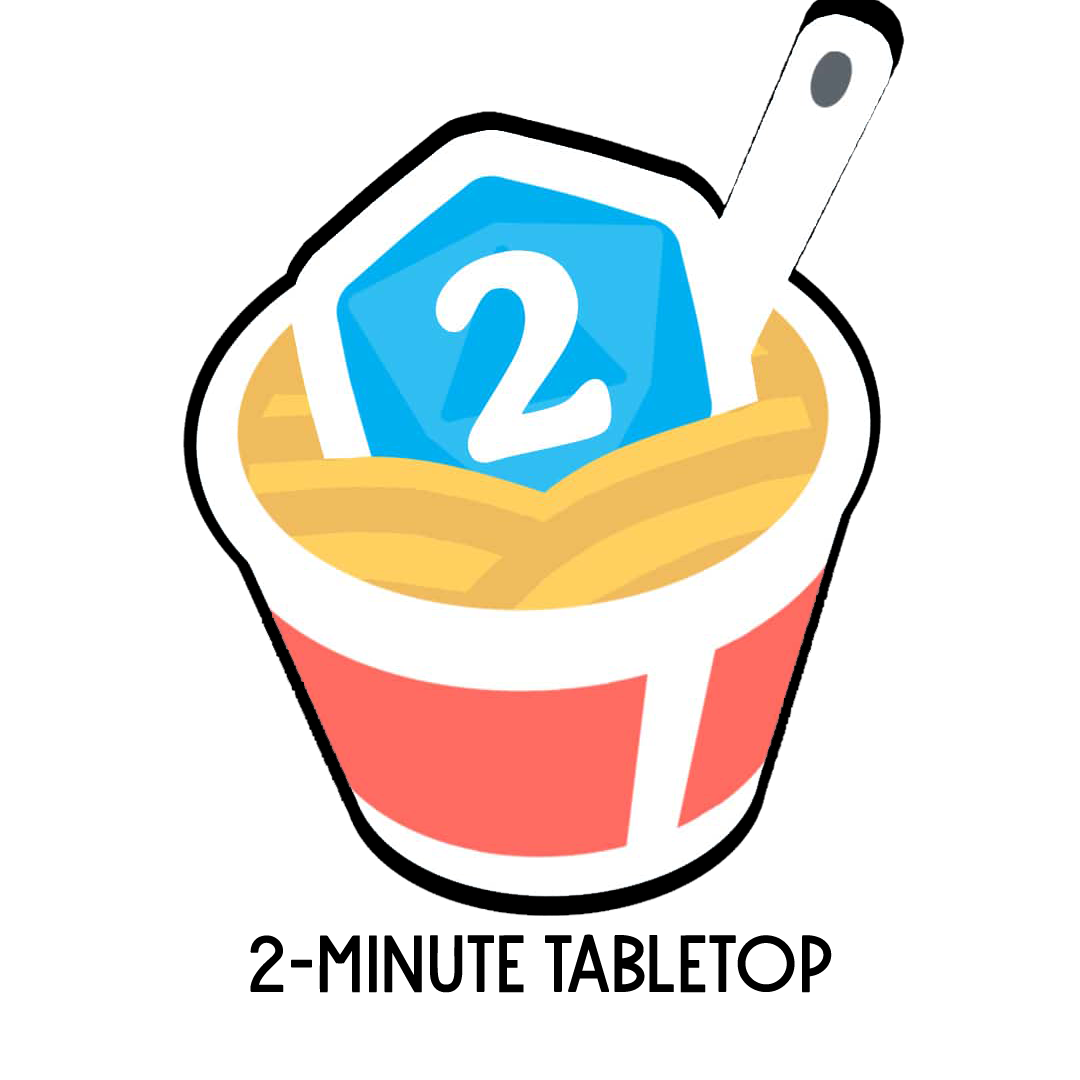
<style>
.page{position:relative;width:1080px;height:1080px;background:#ffffff}
.page>*{position:absolute;margin:0}
.t1{font:80px "Lavigne";color:#000000}
</style>
<div class="page">
<p class="t1" style="left:250px;top:934px;width:582px;height:59px">2-Minute Tabletop</p>
</div>
